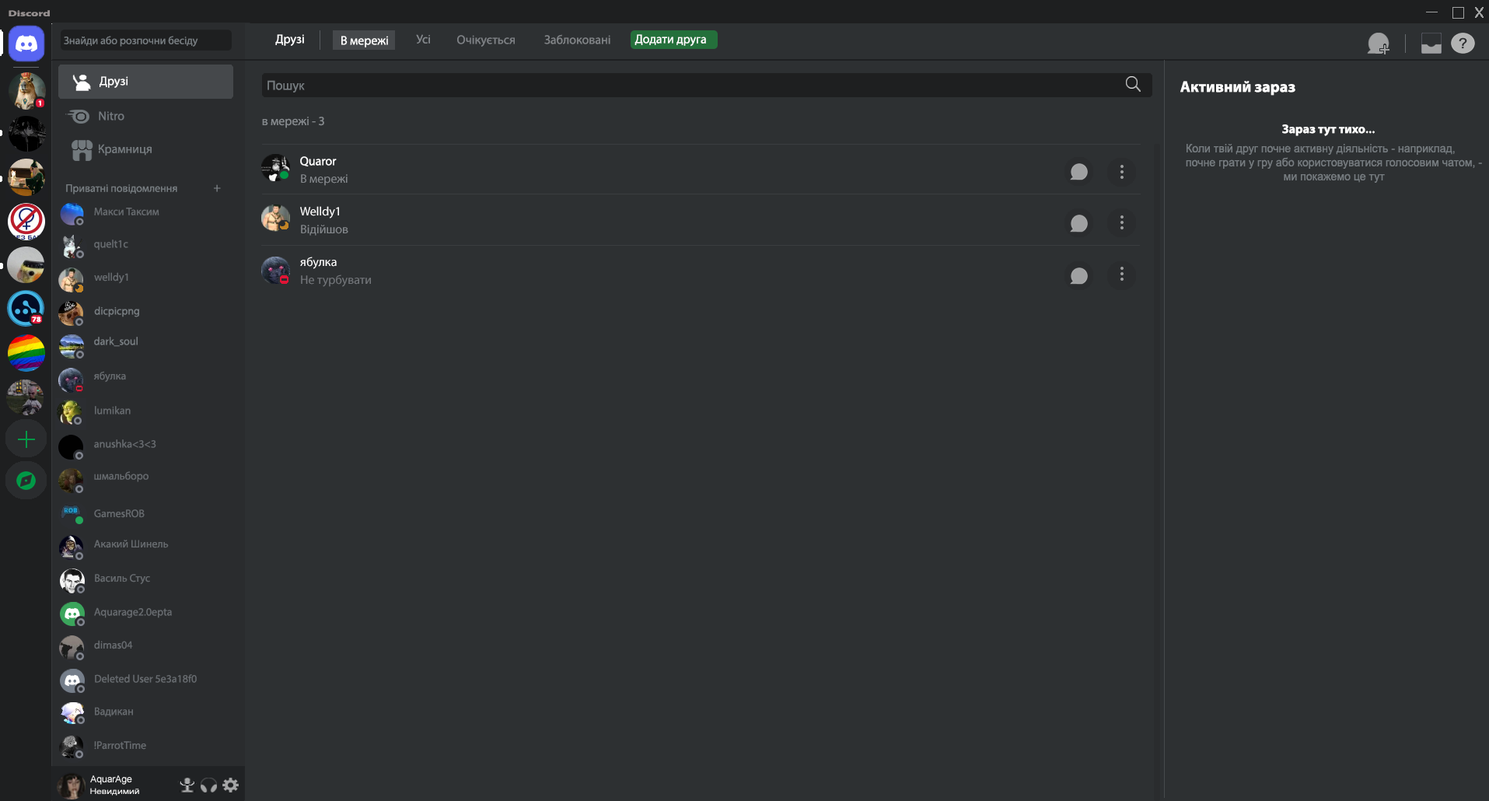
<style>
.page{position:relative;width:1489px;height:801px;background:#2d3032}
.page>*{position:absolute;margin:0}
.t1{font:8.2px "MyriadPro-Bold";color:#969090;scale:1.52 1}
.t2{font:10.9px "MyriadPro-Regular";color:#777d81}
.t3{font:12.4px "MyriadPro-Regular";color:#ffffff}
.t4{font:12.4px "MyriadPro-Regular";color:#84888c}
.t5{font:12.4px "MyriadPro-Regular";color:#7e8185}
.t6{font:12.4px "MyriadPro-Regular";color:#808386}
.t7{font:12.4px "ArialMT";color:#767c80}
.t8{font:15.6px "MyriadPro-Bold";color:#ffffff}
.t9{font:7.3px "MyriadPro-Bold";color:#ffffff}
.t10{font:12.4px "MyriadPro-Regular";color:#747a7f}
.t11{font:12.4px "MyriadPro-Regular";color:#85898d}
.t12{font:12.4px "MyriadPro-Bold";color:#ffffff}
.t13{font:12.4px "MyriadPro-Regular";color:#757b7f}
.t14{font:11.7px "ArialMT";color:#767c80;scale:0.94 1}
.t15{font:10.9px "MyriadPro-Regular";color:#767c80}
.t16{font:12.4px "MyriadPro-Regular";color:#797f83}
.t17{font:10.9px "MyriadPro-Regular";color:#666a6e}
.t18{font:12.4px "MyriadPro-Regular";color:#73767a}
.t19{font:7.2px "MyriadPro-Bold";color:#ffffff;scale:1.1 1}
.t20{font:9.3px "ArialMT";color:#ffffff}
.t21{font:7.8px "ArialMT";color:#ffffff;scale:1.21 1}
</style>
<div class="page">
<p class="t1" style="left:9px;top:10px;width:41px;height:6px">Discord</p>
<p class="t2" style="left:64px;top:36px;width:134px;height:11px">Знайди або розпочни бесіду</p>
<p class="t3" style="left:275px;top:34px;width:29px;height:12px">Друзі</p>
<p class="t3" style="left:341px;top:36px;width:47px;height:11px">В мережі</p>
<p class="t4" style="left:416px;top:34px;width:14px;height:10px">Усі</p>
<p class="t5" style="left:457px;top:35px;width:58px;height:12px">Очікується</p>
<p class="t6" style="left:544px;top:34px;width:66px;height:10px">Заблоковані</p>
<p class="t3" style="left:634px;top:34px;width:72px;height:13px">Додати друга</p>
<p class="t3" style="left:100px;top:76px;width:28px;height:12px">Друзі</p>
<p class="t7" style="left:267px;top:80px;width:38px;height:13px">Пошук</p>
<p class="t8" style="left:1180px;top:81px;width:115px;height:15px">Активний зараз</p>
<p class="t9" style="left:38px;top:100px;width:3px;height:6px">1</p>
<p class="t10" style="left:99px;top:111px;width:25px;height:10px">Nitro</p>
<p class="t11" style="left:262px;top:117px;width:62px;height:11px">в мережі - 3</p>
<p class="t12" style="left:1282px;top:124px;width:93px;height:12px">Зараз тут тихо...</p>
<p class="t13" style="left:99px;top:144px;width:53px;height:12px">Крамниця</p>
<p class="t14" style="left:1186px;top:144px;width:296px;height:39px">Коли твій друг почне активну діяльність - наприклад,<br>почне грати у гру або користовуватися голосовим чатом, -<br>                                ми покажемо це тут</p>
<p class="t3" style="left:300px;top:156px;width:37px;height:10px">Quaror</p>
<p class="t15" style="left:66px;top:184px;width:111px;height:10px">Приватні повідомлення</p>
<p class="t16" style="left:214px;top:184px;width:7px;height:8px">+</p>
<p class="t11" style="left:301px;top:174px;width:47px;height:12px">В мережі</p>
<p class="t17" style="left:94px;top:208px;width:65px;height:7px">Макси Таксим</p>
<p class="t3" style="left:300px;top:206px;width:39px;height:12px">Welldy1</p>
<p class="t11" style="left:301px;top:225px;width:47px;height:11px">Відійшов</p>
<p class="t17" style="left:94px;top:239px;width:34px;height:11px">quelt1c</p>
<p class="t3" style="left:300px;top:257px;width:37px;height:12px">ябулка</p>
<p class="t17" style="left:94px;top:272px;width:34px;height:12px">welldy1</p>
<p class="t18" style="left:301px;top:274px;width:70px;height:13px">Не турбувати</p>
<p class="t19" style="left:32px;top:316px;width:9px;height:6px">78</p>
<p class="t2" style="left:94px;top:306px;width:45px;height:11px">dicpicpng</p>
<p class="t2" style="left:94px;top:337px;width:44px;height:10px">dark_soul</p>
<p class="t17" style="left:93px;top:371px;width:33px;height:12px">ябулка</p>
<p class="t17" style="left:95px;top:406px;width:36px;height:8px">lumikan</p>
<p class="t17" style="left:94px;top:439px;width:62px;height:9px">anushka&lt;3&lt;3</p>
<p class="t17" style="left:94px;top:471px;width:55px;height:11px">шмальборо</p>
<p class="t17" style="left:94px;top:509px;width:51px;height:9px">GamesROB</p>
<p class="t17" style="left:94px;top:540px;width:75px;height:8px">Акакий Шинель</p>
<p class="t17" style="left:95px;top:574px;width:55px;height:11px">Василь Стус</p>
<p class="t17" style="left:94px;top:607px;width:78px;height:11px">Aquarage2.0epta</p>
<p class="t17" style="left:94px;top:640px;width:39px;height:9px">dimas04</p>
<p class="t17" style="left:95px;top:674px;width:102px;height:9px">Deleted User 5e3a18f0</p>
<p class="t17" style="left:95px;top:707px;width:38px;height:10px">Вадикан</p>
<p class="t17" style="left:94px;top:741px;width:52px;height:9px">!ParrotTime</p>
<p class="t20" style="left:90px;top:775px;width:42px;height:10px">AquarAge</p>
<p class="t21" style="left:90px;top:788px;width:49px;height:7px">Невидимий</p>
</div>
